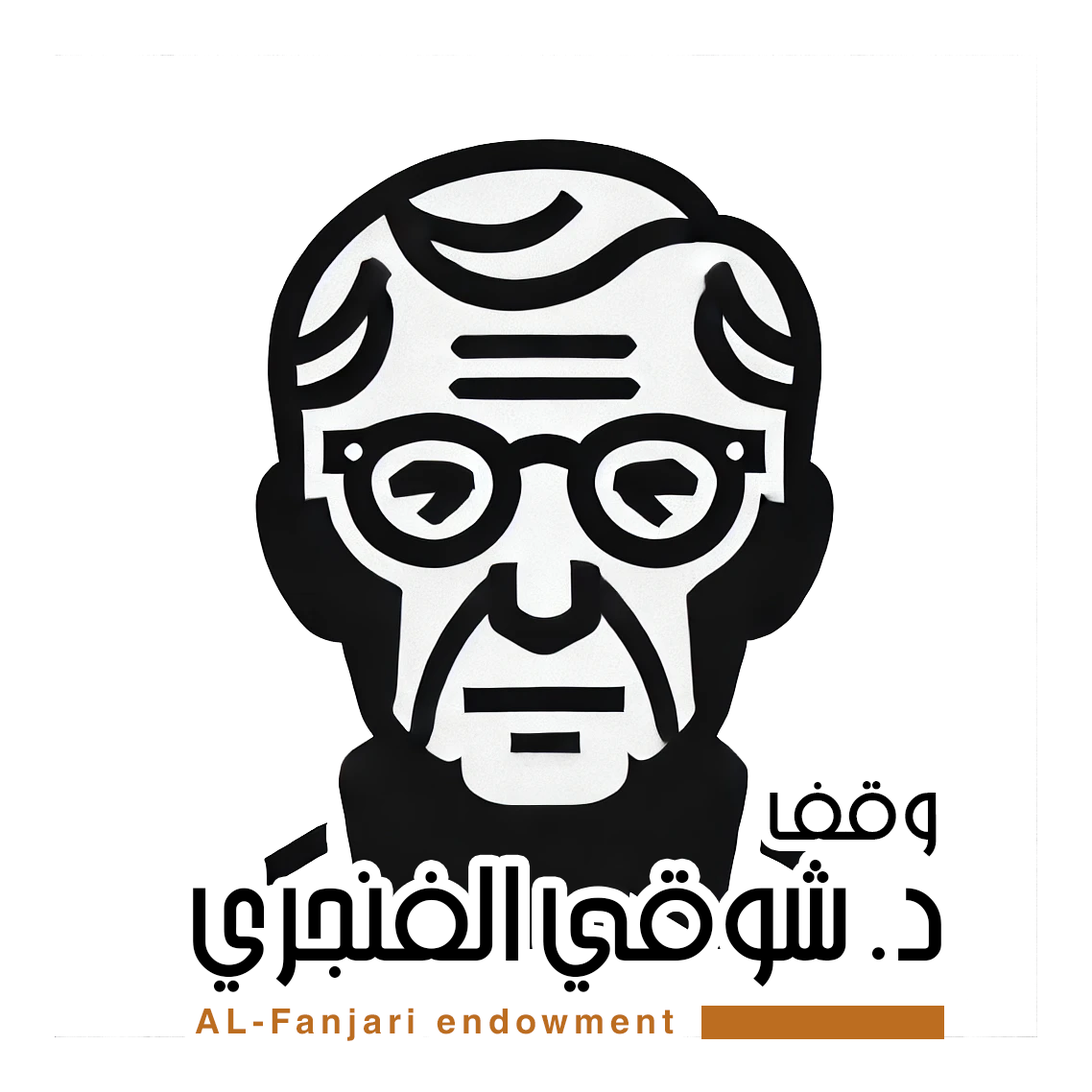
<style>
.page{position:relative;width:1092px;height:1092px;background:#ffffff}
.page>*{position:absolute;margin:0}
.t1{font:85.2px "SC_DUBAI";color:#000000}
.t2{font:131.1px "SC_DUBAI";color:#000000}
.t3{font:39.7px "HacenMaghreb";letter-spacing:0.14em;color:#bc6d20}
</style>
<div class="page">
<p class="t1" style="left:770px;top:781px;width:167px;height:76px">وقف</p>
<p class="t2" style="left:193px;top:859px;width:748px;height:133px">د. شوقي الفنجري</p>
<p class="t3" style="left:195px;top:1008px;width:479px;height:33px">AL-Fanjari endowment</p>
</div>
